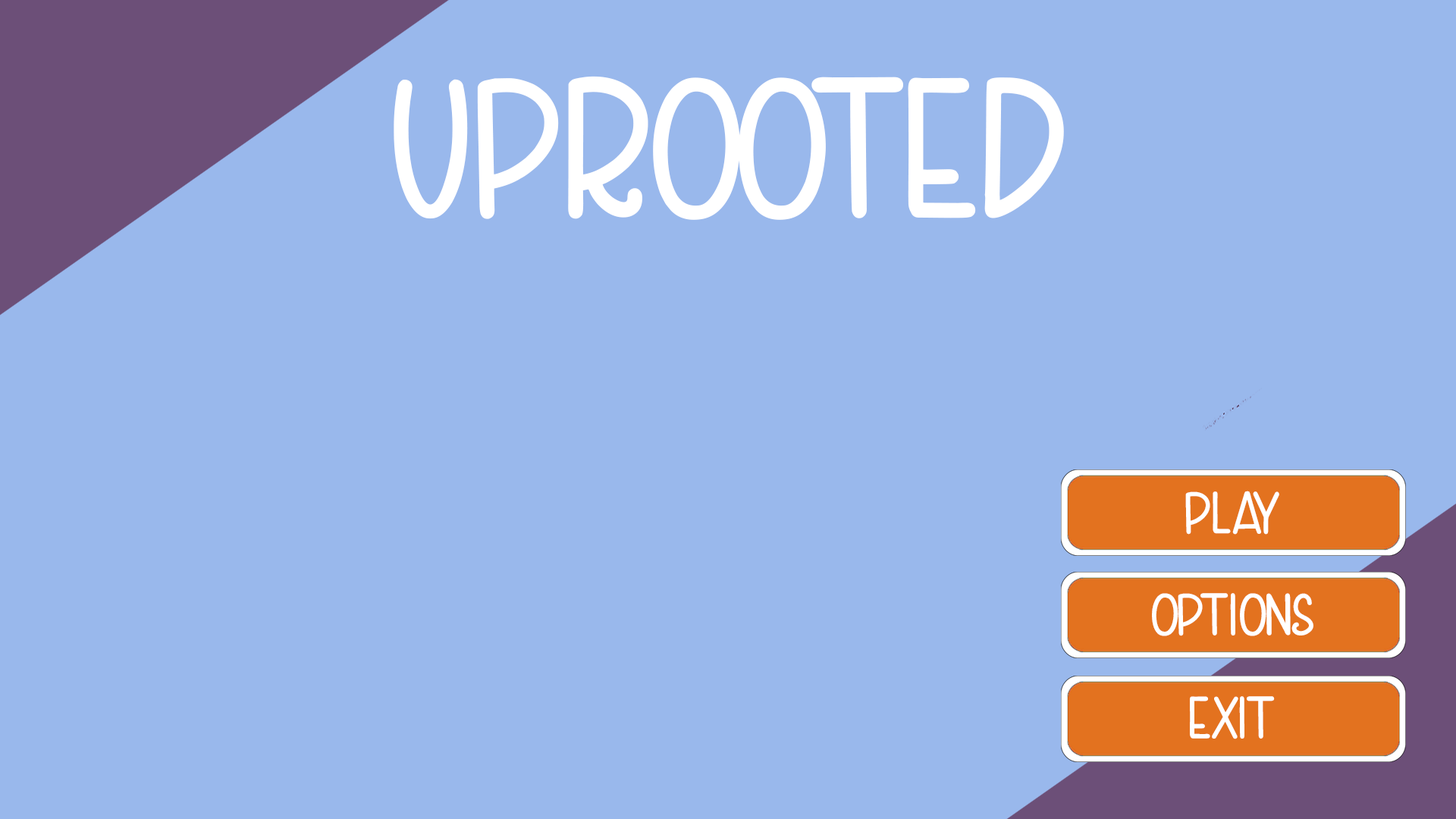
<style>
.page{position:relative;width:1456px;height:819px;background:#99b8ec}
.page>*{position:absolute;margin:0}
.t1{font:210.6px "LovelyValentineSans";color:#ffffff}
.t2{font:63.2px "LovelyValentineSans";color:#ffffff}
</style>
<div class="page">
<p class="t1" style="left:394px;top:76px;width:670px;height:144px">UPROOTED</p>
<p class="t2" style="left:1185px;top:491px;width:94px;height:44px">Play</p>
<p class="t2" style="left:1152px;top:593px;width:161px;height:43px">Options</p>
<p class="t2" style="left:1190px;top:696px;width:85px;height:43px">Exit</p>
</div>
